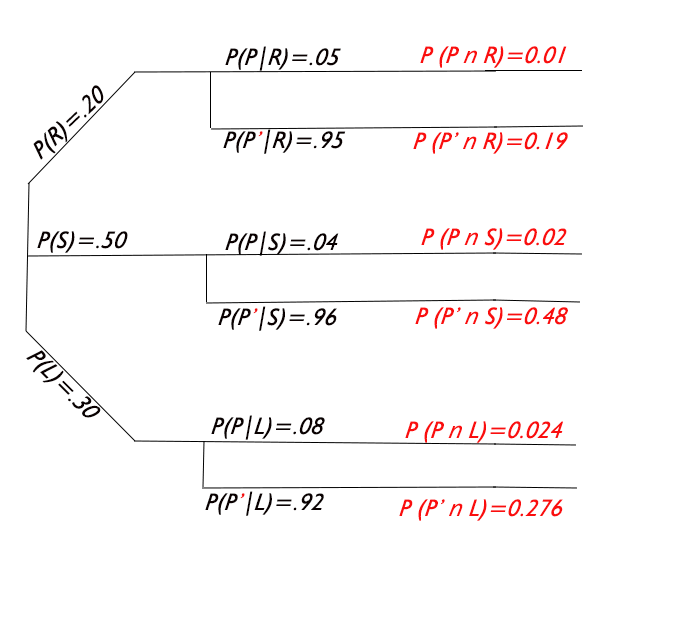
<style>
.page{position:relative;width:678px;height:632px;background:#ffffff}
.page>*{position:absolute;margin:0}
.t1{font:24px "Humanist521BT-Italic";letter-spacing:0.005em;color:#0a0101;font-style:italic}
.t2{font:24px "Humanist521BT-Italic";letter-spacing:0.005em;color:#fa0e0e;font-style:italic}
.t3{font:24px "SegoeUI-Italic";letter-spacing:0.005em;color:#fa0e0e;font-style:italic}
.t4{font:24px "Humanist521BT-Italic";letter-spacing:0.005em;color:#f40d0d;font-style:italic}
</style>
<div class="page">
<p class="t1" style="left:225px;top:46px;width:116px;height:25px">P(P|R)=.05</p>
<p class="t2" style="left:420px;top:46px;width:147px;height:22px">P (P <span class="t3">n </span>R)=0.01</p>
<p class="t1" style="left:33px;top:85px;width:71px;height:75px;rotate:-44deg">P(R)=.20</p>
<p class="t1" style="left:223px;top:129px;width:123px;height:25px">P(P<span class="t4">’</span>|R)=.95</p>
<p class="t2" style="left:413px;top:132px;width:155px;height:22px">P (P’ <span class="t3">n </span>R)=0.19</p>
<p class="t1" style="left:37px;top:231px;width:91px;height:22px">P(S)=.50</p>
<p class="t1" style="left:225px;top:231px;width:114px;height:25px">P(P|S)=.04</p>
<p class="t2" style="left:421px;top:228px;width:146px;height:22px">P (P <span class="t3">n </span>S)=0.02</p>
<p class="t1" style="left:218px;top:306px;width:119px;height:25px">P(P<span class="t4">’</span>|S)=.96</p>
<p class="t2" style="left:415px;top:307px;width:153px;height:22px">P (P’ <span class="t3">n </span>S)=0.48</p>
<p class="t1" style="left:26px;top:350px;width:75px;height:68px;rotate:45deg">P(L)=.30</p>
<p class="t1" style="left:211px;top:415px;width:114px;height:25px">P(P|L)=.08</p>
<p class="t2" style="left:405px;top:421px;width:158px;height:22px">P (P <span class="t3">n </span>L)=0.024</p>
<p class="t1" style="left:205px;top:491px;width:119px;height:25px">P(P<span class="t4">’</span>|L)=.92</p>
<p class="t2" style="left:399px;top:499px;width:164px;height:22px">P (P’ <span class="t3">n </span>L)=0.276</p>
</div>
